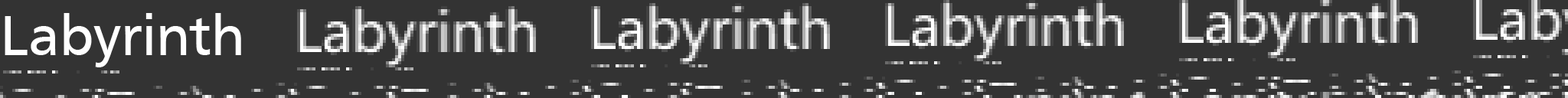
<style>
.page{position:relative;width:1568px;height:98px;background:#333333}
.page>*{position:absolute;margin:0}
.t1{font:58.9px "Frutiger";color:#ffffff}
</style>
<div class="page">
<p class="t1" style="left:5px;top:13px;width:236px;height:54px">Labyrinth</p>
</div>
